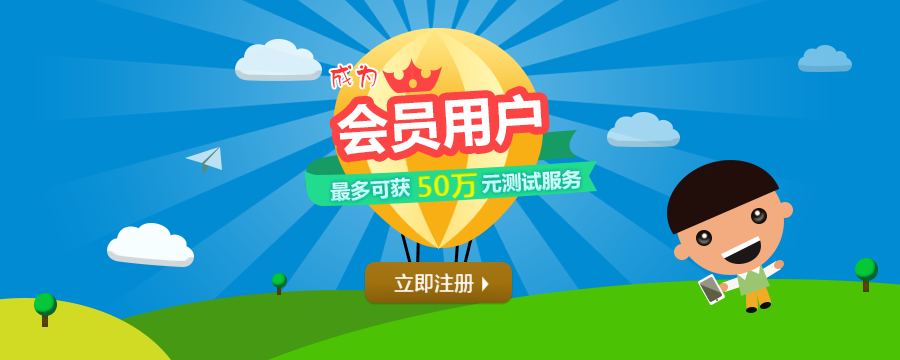
<style>
.page{position:relative;width:900px;height:360px;background:#018bd3}
.page>*{position:absolute;margin:0}
.t1{font:26px "HYr1gj";color:#ff3434}
.t2{font:52px "MicrosoftYaHei-Bold";color:#ffffff}
.t3{font:20px "MicrosoftYaHei-Bold";color:#cefff8}
.t4{font:28px "MicrosoftYaHei-Bold";color:#d7fa0a}
.t5{font:20px "MicrosoftYaHei-Bold";color:#efe7d7}
</style>
<div class="page">
<p class="t1" style="left:330px;top:65px;width:47px;height:23px">成为</p>
<p class="t2" style="left:337px;top:94px;width:205px;height:61px;rotate:-4deg">会员用户</p>
<p class="t3" style="left:330px;top:170px;width:252px;height:32px;rotate:-3deg">最多可获            元测试服务</p>
<p class="t4" style="left:418px;top:172px;width:59px;height:27px;rotate:-3deg">50万</p>
<p class="t5" style="left:394px;top:273px;width:80px;height:20px">立即注册</p>
</div>
